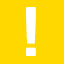
<style>
.page{position:relative;width:64px;height:64px;background:#ffd800}
.page>*{position:absolute;margin:0}
.t1{font:65px "LucidaSans";letter-spacing:0.021em;color:#ffffff;font-weight:bold;scale:1.2 1}
</style>
<div class="page">
<p class="t1" style="left:26px;top:7px;width:10px;height:49px">!</p>
</div>
